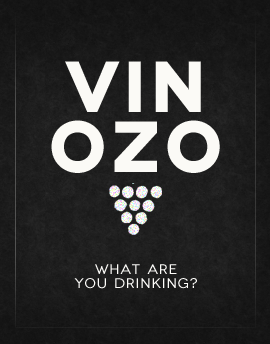
<style>
.page{position:relative;width:270px;height:344px}
.page>*{position:absolute;margin:0}
.t1{font:72px/60px "Novecentowide-Bold";letter-spacing:0.05em;color:#fbfaf6}
.t2{font:14px/14px "Novecentowide-Normal";letter-spacing:0.05em;color:#fffefb}
</style>
<div class="page">
<p class="t1" style="left:51px;top:61px;width:169px;height:112px;text-align:center">VIN<br>OZO</p>
<p class="t2" style="left:74px;top:264px;width:123px;height:25px;text-align:center">What are<br>you drinking?</p>
</div>
